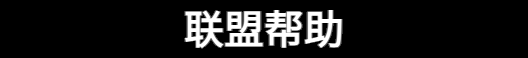
<style>
.page{position:relative;width:528px;height:58px;background:#000000}
.page>*{position:absolute;margin:0}
.t1{font:40px "WebPSD-18463539-0-Regular";color:#ffffff;font-weight:bold}
</style>
<div class="page">
<p class="t1" style="left:0px;top:0px;width:528px;height:58px">联盟帮助</p>
</div>
